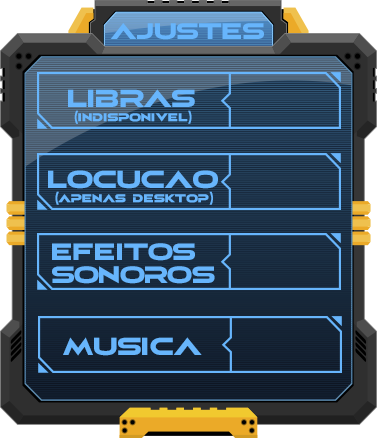
<style>
.page{position:relative;width:377px;height:438px}
.page>*{position:absolute;margin:0}
.t1{font:27.5px "elasisrg";letter-spacing:-0.025em;color:#67b5fc}
.t2{font:30.1px "elasisrg";letter-spacing:-0.025em;color:#67b5fc}
.t3{font:13.4px "elasisrg";color:#67b5fc;font-weight:bold;scale:0.95 1}
.t4{font:28.7px/22.9px "elasisrg";letter-spacing:-0.025em;color:#67b5fc}
</style>
<div class="page">
<p class="t1" style="left:110px;top:23px;width:154px;height:17px">ajustes</p>
<p class="t2" style="left:68px;top:89px;width:127px;height:18px">libras</p>
<p class="t3" style="left:74px;top:110px;width:118px;height:14px">(indisponivel)</p>
<p class="t2" style="left:48px;top:170px;width:170px;height:19px">locucao</p>
<p class="t3" style="left:55px;top:191px;width:158px;height:14px">(apenas desktop)</p>
<p class="t4" style="left:52px;top:243px;width:163px;height:41px">EFEITOS<br>SONOROS</p>
<p class="t2" style="left:63px;top:337px;width:139px;height:19px">MUSICA</p>
</div>
